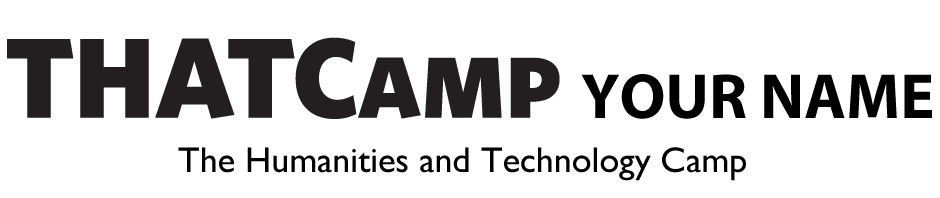
<style>
.page{position:relative;width:940px;height:198px;background:#ffffff}
.page>*{position:absolute;margin:0}
.t1{font:64px "MyriadPro-Bold";color:#000000}
.t2{font:36px "GillSans";color:#000000}
</style>
<div class="page">
<p class="t1" style="left:581px;top:74px;width:351px;height:45px">YOUR NAME</p>
<p class="t2" style="left:178px;top:147px;width:568px;height:34px">The Humanities and Technology Camp</p>
</div>
